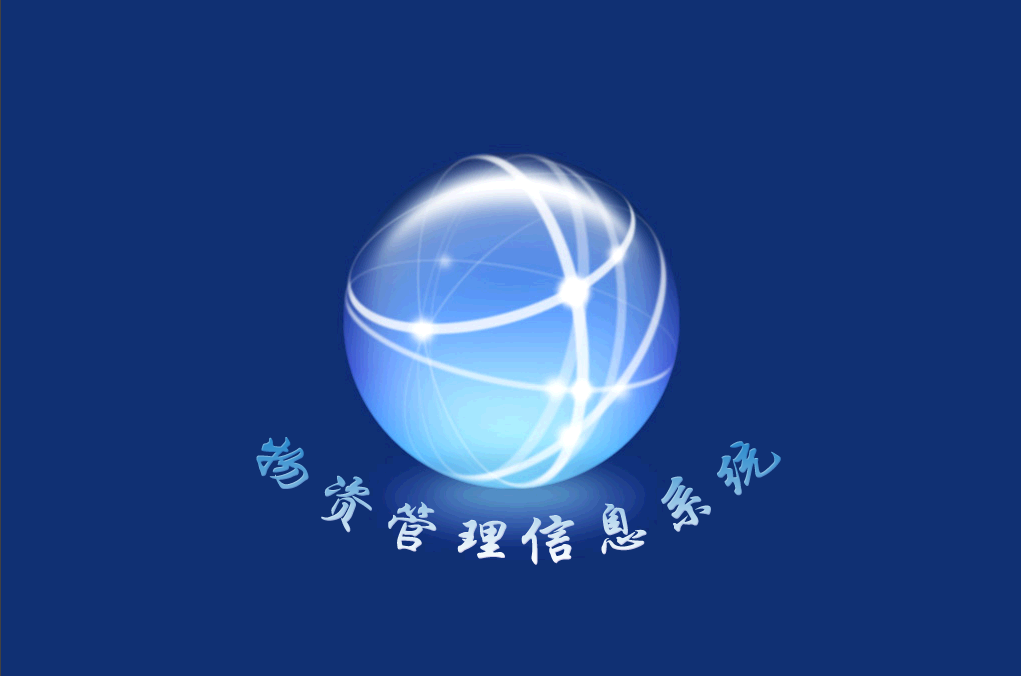
<style>
.page{position:relative;width:1021px;height:676px;background:#103073}
.page>*{position:absolute;margin:0}
.t1{font:60px "STXingkai"}
</style>
<div class="page">
<p class="t1" style="left:256px;top:437px;width:525px;height:128px">物资管理信息系统</p>
</div>
